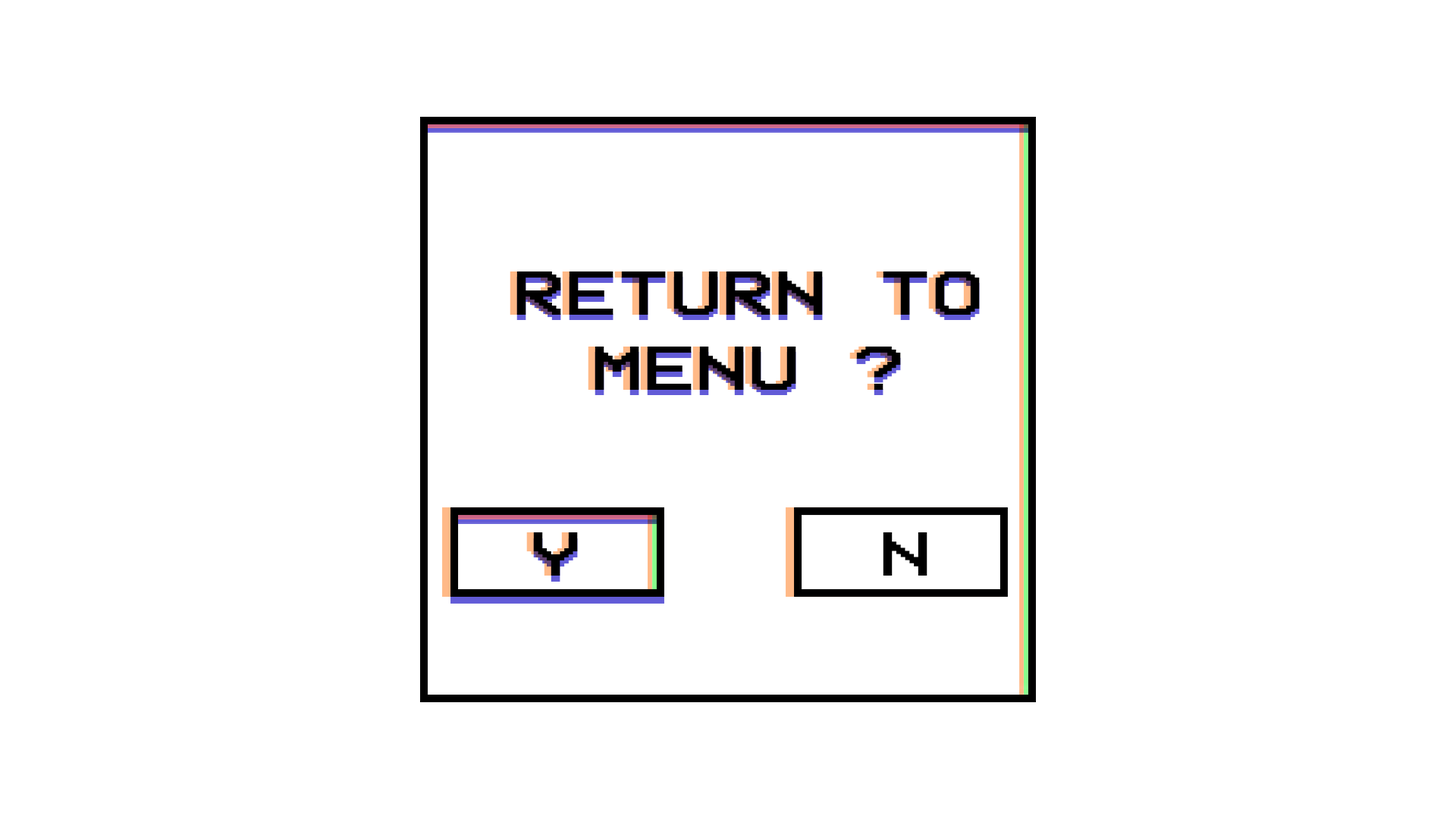
<style>
.page{position:relative;width:1456px;height:819px;background:#ffffff}
.page>*{position:absolute;margin:0}
.t1{font:62.6px "VCROSDMono";color:#000000;scale:1.43 1}
</style>
<div class="page">
<p class="t1" style="left:516px;top:271px;width:464px;height:119px;text-align:center">RETURN TO<br>MENU ?</p>
<p class="t1" style="left:533px;top:532px;width:45px;height:44px">Y</p>
<p class="t1" style="left:883px;top:532px;width:44px;height:44px">N</p>
</div>
